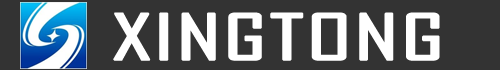
<style>
.page{position:relative;width:500px;height:70px;background:#333333}
.page>*{position:absolute;margin:0}
.t1{font:60px "AgencyFB-Reg";color:#ffffff;font-weight:bold;scale:1.68 1}
</style>
<div class="page">
<p class="t1" style="left:113px;top:12px;width:327px;height:49px">XINGTONG</p>
</div>
